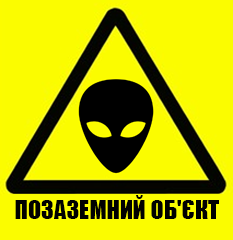
<style>
.page{position:relative;width:233px;height:240px;background:#fbfc00}
.page>*{position:absolute;margin:0}
.t1{font:24.2px "Impact";color:#000000;text-transform:uppercase}
</style>
<div class="page">
<p class="t1" style="left:15px;top:195px;width:204px;height:24px">позаземний об'єкт</p>
</div>
